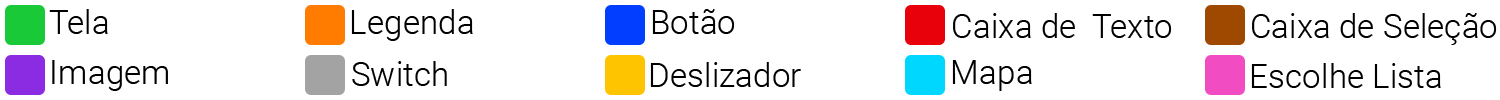
<style>
.page{position:relative;width:1500px;height:100px;background:#ffffff}
.page>*{position:absolute;margin:0}
.t1{font:33.3px "Roboto-Light";color:#000000}
</style>
<div class="page">
<p class="t1" style="left:49px;top:9px;width:59px;height:25px">Tela</p>
<p class="t1" style="left:351px;top:9px;width:122px;height:32px">Legenda</p>
<p class="t1" style="left:652px;top:9px;width:83px;height:25px">Botão</p>
<p class="t1" style="left:953px;top:13px;width:219px;height:25px">Caixa de  Texto</p>
<p class="t1" style="left:1252px;top:13px;width:245px;height:32px">Caixa de Seleção</p>
<p class="t1" style="left:52px;top:60px;width:116px;height:31px">Imagem</p>
<p class="t1" style="left:352px;top:61px;width:95px;height:25px">Switch</p>
<p class="t1" style="left:650px;top:62px;width:151px;height:25px">Deslizador</p>
<p class="t1" style="left:952px;top:60px;width:80px;height:31px">Mapa</p>
<p class="t1" style="left:1251px;top:63px;width:190px;height:25px">Escolhe Lista</p>
</div>
